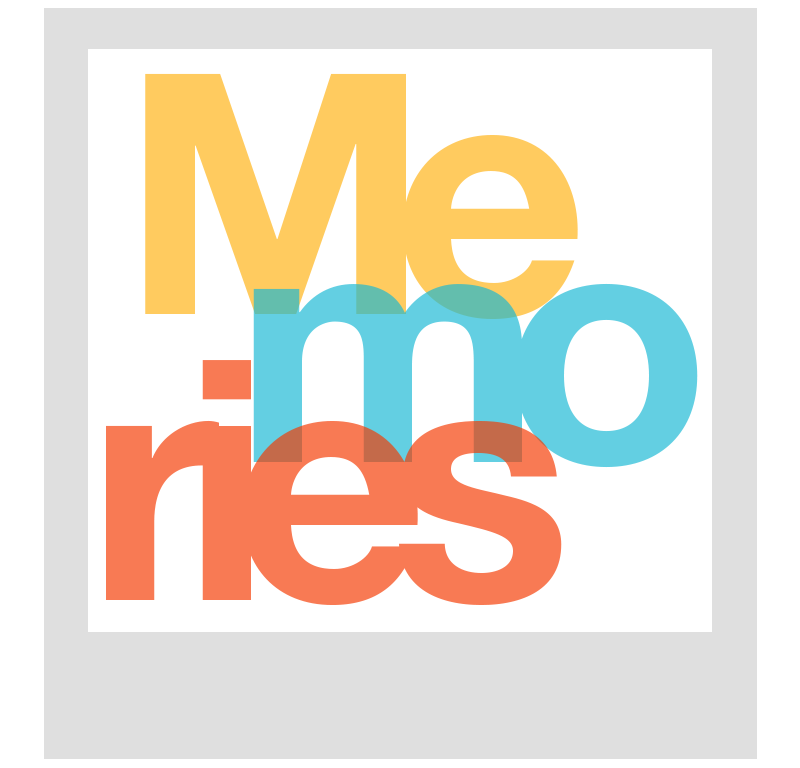
<style>
.page{position:relative;width:800px;height:768px;background:#ffffff}
.page>*{position:absolute;margin:0}
.t1{font:336.3px "HelveticaNeue-Bold";letter-spacing:-0.1em;color:#ffcb5f}
.t2{font:335.5px "HelveticaNeue-Bold";letter-spacing:-0.1em;color:#63cfe2}
.t3{font:336.3px "HelveticaNeue-Bold";letter-spacing:-0.1em;color:#f87a54}
</style>
<div class="page">
<p class="t1" style="left:145px;top:73px;width:433px;height:246px">Me</p>
<p class="t2" style="left:253px;top:283px;width:445px;height:185px">mo</p>
<p class="t3" style="left:106px;top:360px;width:456px;height:245px">ries</p>
</div>
